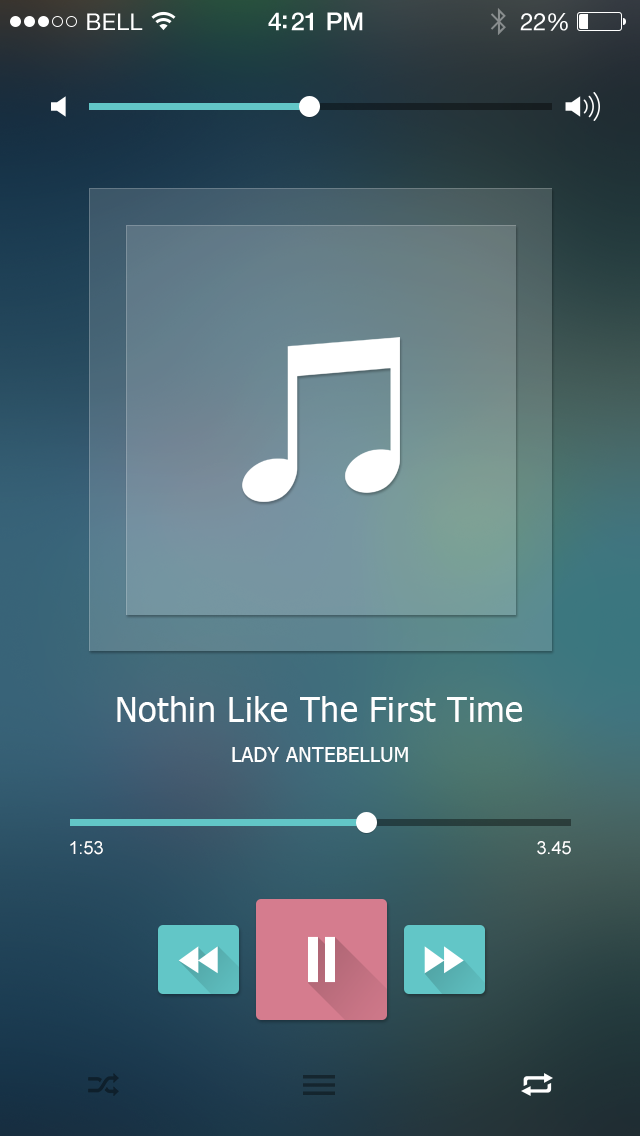
<style>
.page{position:relative;width:640px;height:1136px}
.page>*{position:absolute;margin:0}
.t1{font:33.6px "Tahoma";letter-spacing:0.02em;color:#ffffff}
.t2{font:20px "Tahoma";letter-spacing:0.02em;color:#ffffff;text-transform:uppercase}
.t3{font:20px "Tahoma";letter-spacing:0.02em;color:#ffffff}
.t4{font:18px "ArialMT";color:#ffffff}
</style>
<div class="page">
<p class="t1" style="left:117px;top:696px;width:405px;height:26px">Nothin Like The First Time</p>
<p class="t2" style="left:232px;top:747px;width:176px;height:15px"><span class="t3"> </span>Lady Antebellum</p>
<p class="t4" style="left:70px;top:841px;width:33px;height:14px">1:53</p>
<p class="t4" style="left:537px;top:841px;width:34px;height:14px">3.45</p>
</div>
